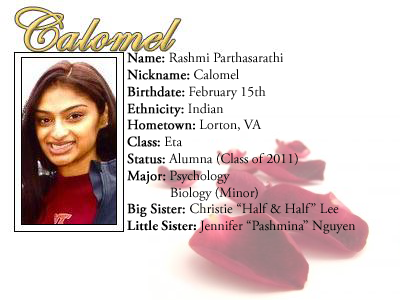
<style>
.page{position:relative;width:400px;height:300px;background:#ffffff}
.page>*{position:absolute;margin:0}
.t1{font:14px "AGaramondPro-Regular";color:#000000}
.t2{font:14px "AGaramondPro-Regular";color:#000000;font-weight:bold}
.t3{font:14px "AGaramondPro-Bold";color:#000000}
</style>
<div class="page">
<p class="t1" style="left:127px;top:52px;width:229px;height:182px"><span class="t2">Name:</span> Rashmi Parthasarathi<br><span class="t2">Nickname:</span> Calomel<br><span class="t2">Birthdate:</span> February 15th<br><span class="t2">Ethnicity:</span> Indian<br><span class="t2">Hometown:</span> Lorton, VA<br><span class="t2">Class:</span> Eta<br><span class="t2">Status:</span> Alumna (Class of 2011)<br><span class="t2">Major:</span> Psychology<br>   Biology (Minor)<br><span class="t2">Big Sister: </span>Christie “Half &amp; Half” Lee<br><span class="t3">Little Sister:</span> Jennifer “Pashmina” Nguyen</p>
</div>
